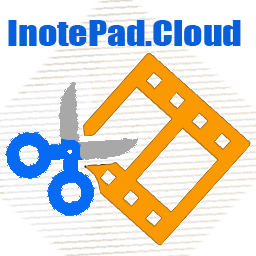
<style>
.page{position:relative;width:256px;height:256px;background:#ffffff}
.page>*{position:absolute;margin:0}
.t1{font:33.4px "Impact";color:#0760d9;scale:1.13 1}
</style>
<div class="page">
<p class="t1" style="left:8px;top:20px;width:233px;height:26px">InotePad.Cloud</p>
</div>
